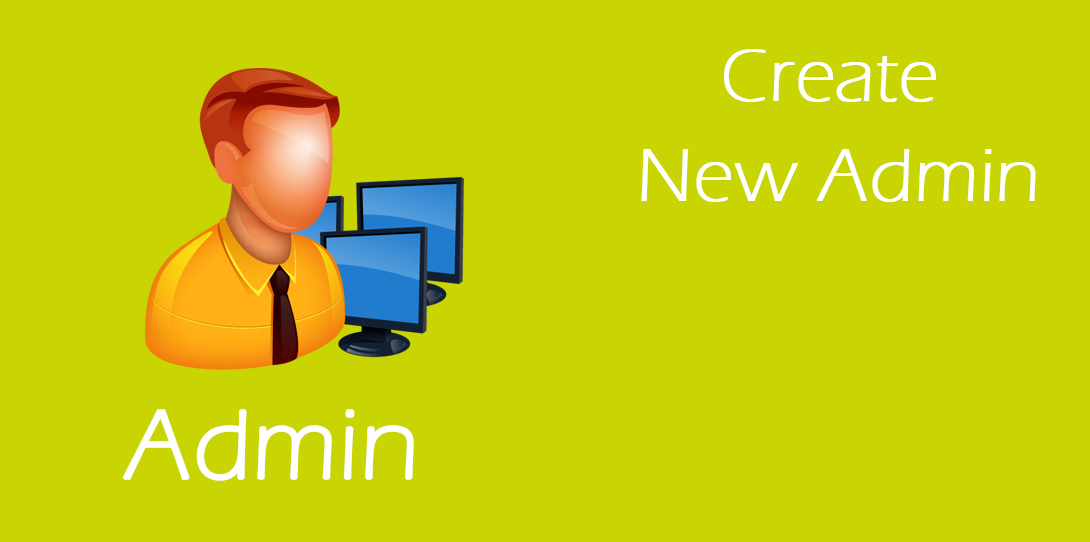
<style>
.page{position:relative;width:1090px;height:542px;background:#c9d503}
.page>*{position:absolute;margin:0}
.t1{font:76.3px/100px "ErasITC-Light";color:#ffffff;font-weight:bold}
.t2{font:101.2px "ErasITC-Light";color:#ffffff;font-weight:bold}
</style>
<div class="page">
<p class="t1" style="left:641px;top:49px;width:395px;height:153px">Create<br> New Admin</p>
<p class="t2" style="left:122px;top:409px;width:292px;height:72px">Admin</p>
</div>
